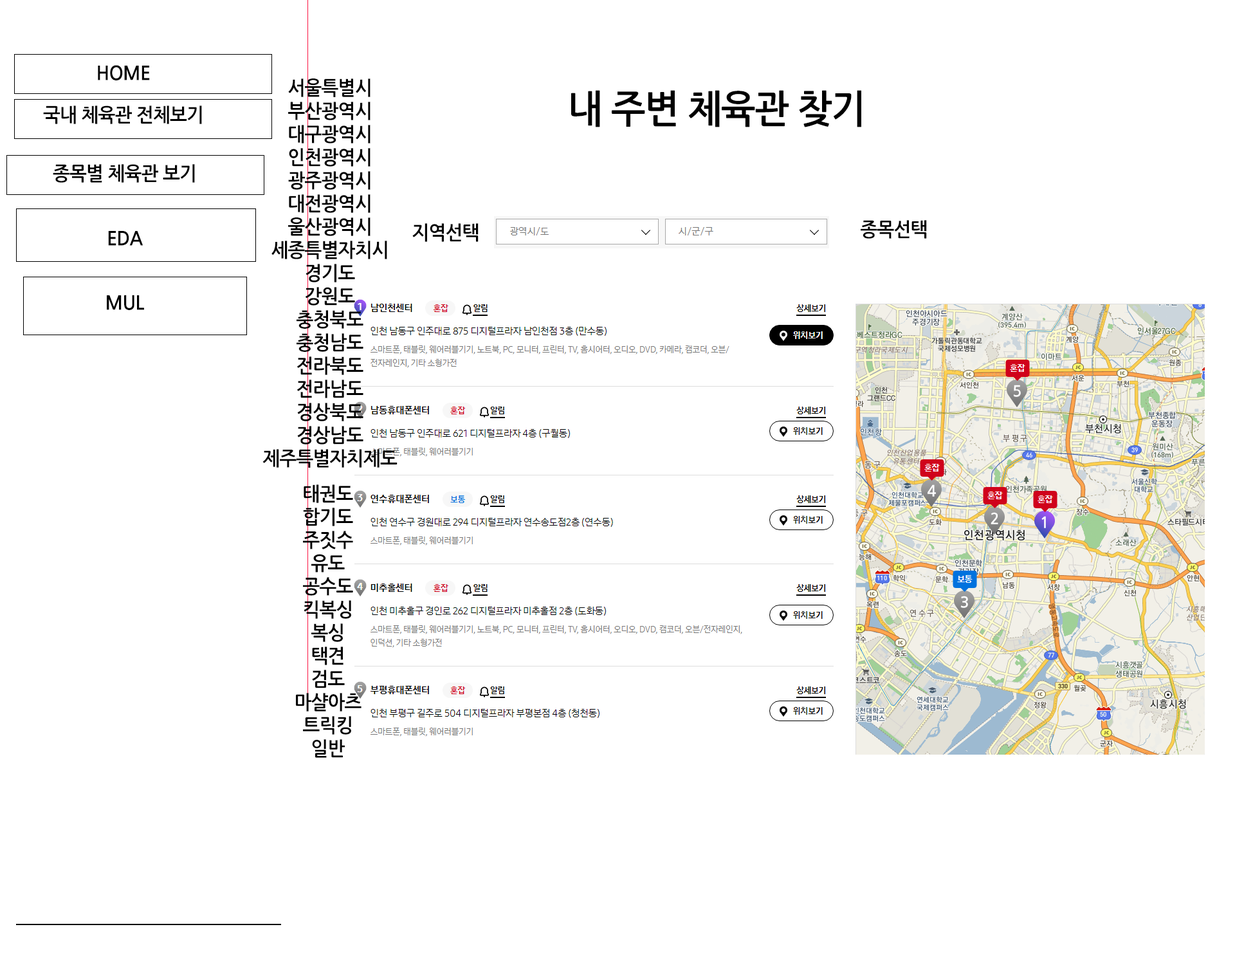
<style>
.page{position:relative;width:1235px;height:965px;background:#ffffff}
.page>*{position:absolute;margin:0}
.t1{font:19.3px "NanumGothicBold";letter-spacing:-0.025em;color:#000000;scale:0.95 1}
.t2{font:38.6px "NanumGothicBold";letter-spacing:-0.025em;color:#000000;scale:0.95 1}
</style>
<div class="page">
<p class="t1" style="left:98px;top:65px;width:52px;height:15px">HOME</p>
<p class="t1" style="left:263px;top:79px;width:135px;height:389px;text-align:center">서울특별시<br>부산광역시<br>대구광역시<br>인천광역시<br>광주광역시<br>대전광역시<br>울산광역시<br>세종특별자치시<br>경기도<br>강원도<br>충청북도<br>충청남도<br>전라북도<br>전라남도<br>경상북도<br>경상남도<br>제주특별자치제도</p>
<p class="t2" style="left:571px;top:90px;width:291px;height:37px">내 주변 체육관 찾기</p>
<p class="t1" style="left:43px;top:106px;width:159px;height:18px">국내 체육관 전체보기</p>
<p class="t1" style="left:53px;top:164px;width:142px;height:19px">종목별 체육관 보기</p>
<p class="t1" style="left:861px;top:220px;width:66px;height:19px">종목선택</p>
<p class="t1" style="left:108px;top:231px;width:35px;height:15px">EDA</p>
<p class="t1" style="left:412px;top:223px;width:67px;height:19px">지역선택</p>
<p class="t1" style="left:107px;top:295px;width:37px;height:15px">MUL</p>
<p class="t1" style="left:296px;top:485px;width:66px;height:273px;text-align:center">태권도<br>합기도<br>주짓수<br>유도<br>공수도<br>킥복싱<br>복싱<br>택견<br>검도<br>마샬아츠<br>트릭킹<br>일반</p>
</div>
